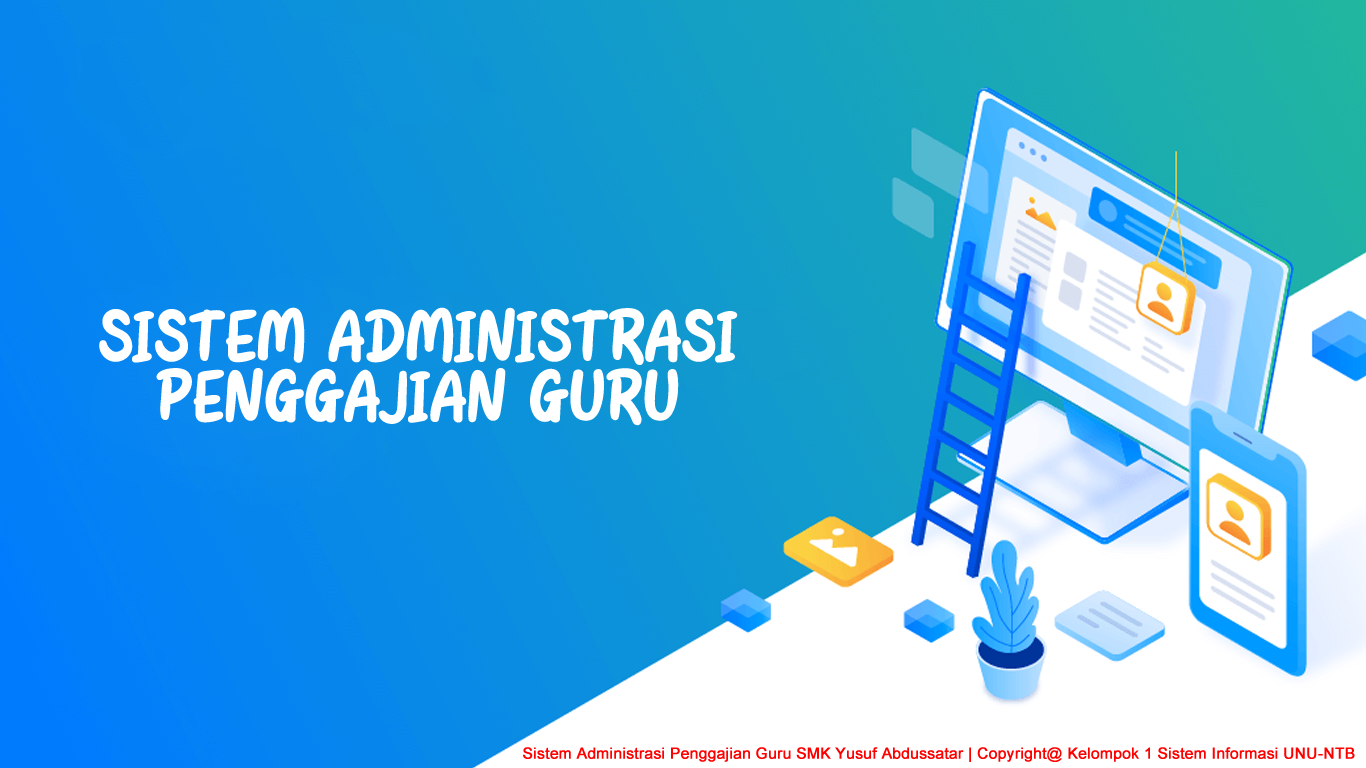
<style>
.page{position:relative;width:1366px;height:768px}
.page>*{position:absolute;margin:0}
.t1{font:60.4px/60.2px "QuantumProfitRegular";color:#ffffff;font-weight:bold}
.t2{font:15.4px "ArialMT";color:#fe0000;font-weight:bold}
</style>
<div class="page">
<p class="t1" style="left:99px;top:307px;width:639px;height:119px;text-align:center">SISTEM ADMINISTRASI<br>PENGGAJIAN GURU</p>
<p class="t2" style="left:523px;top:747px;width:832px;height:15px">Sistem Administrasi Penggajian Guru SMK Yusuf Abdussatar | Copyright@ Kelompok 1 Sistem Informasi UNU-NTB</p>
</div>
